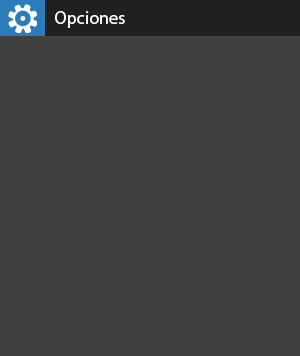
<style>
.page{position:relative;width:300px;height:356px;background:#404040}
.page>*{position:absolute;margin:0}
.t1{font:18px "MyriadPro-Regular";color:#ffffff}
</style>
<div class="page">
<p class="t1" style="left:55px;top:11px;width:70px;height:17px">Opciones</p>
</div>
